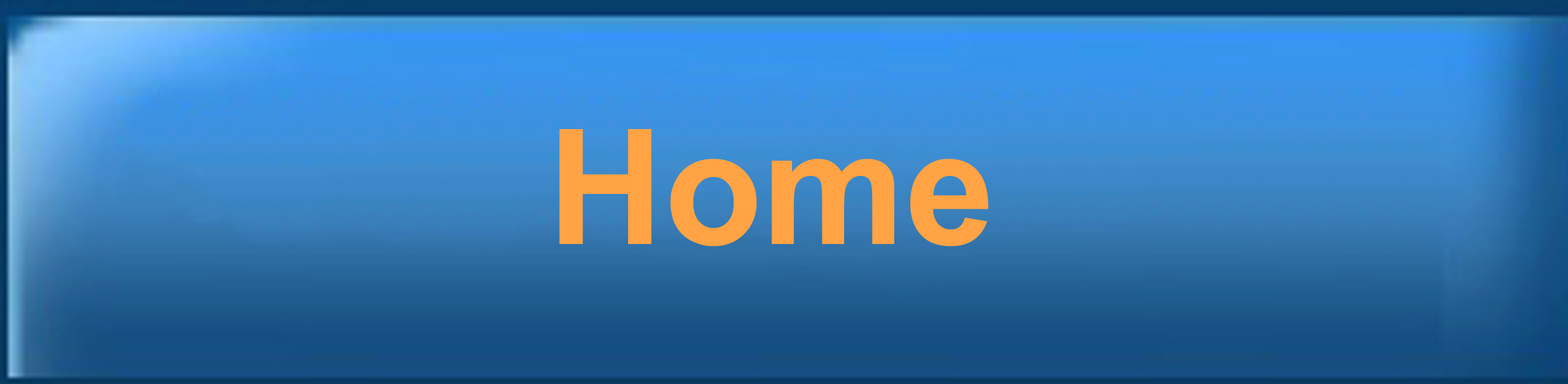
<style>
.page{position:relative;width:1568px;height:384px}
.page>*{position:absolute;margin:0}
.t1{font:160.7px "Arial-BoldMT";color:#ffa344}
</style>
<div class="page">
<p class="t1" style="left:559px;top:129px;width:430px;height:118px">Home</p>
</div>
